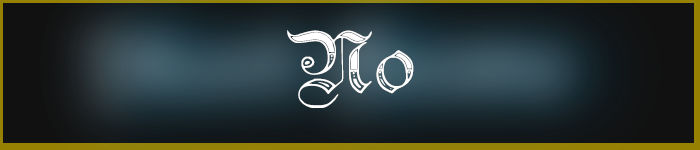
<style>
.page{position:relative;width:700px;height:150px}
.page>*{position:absolute;margin:0}
.t1{font:72px "TeutonicNo4-DemiBold";color:#ffffff}
</style>
<div class="page">
<p class="t1" style="left:287px;top:30px;width:127px;height:78px">No</p>
</div>
